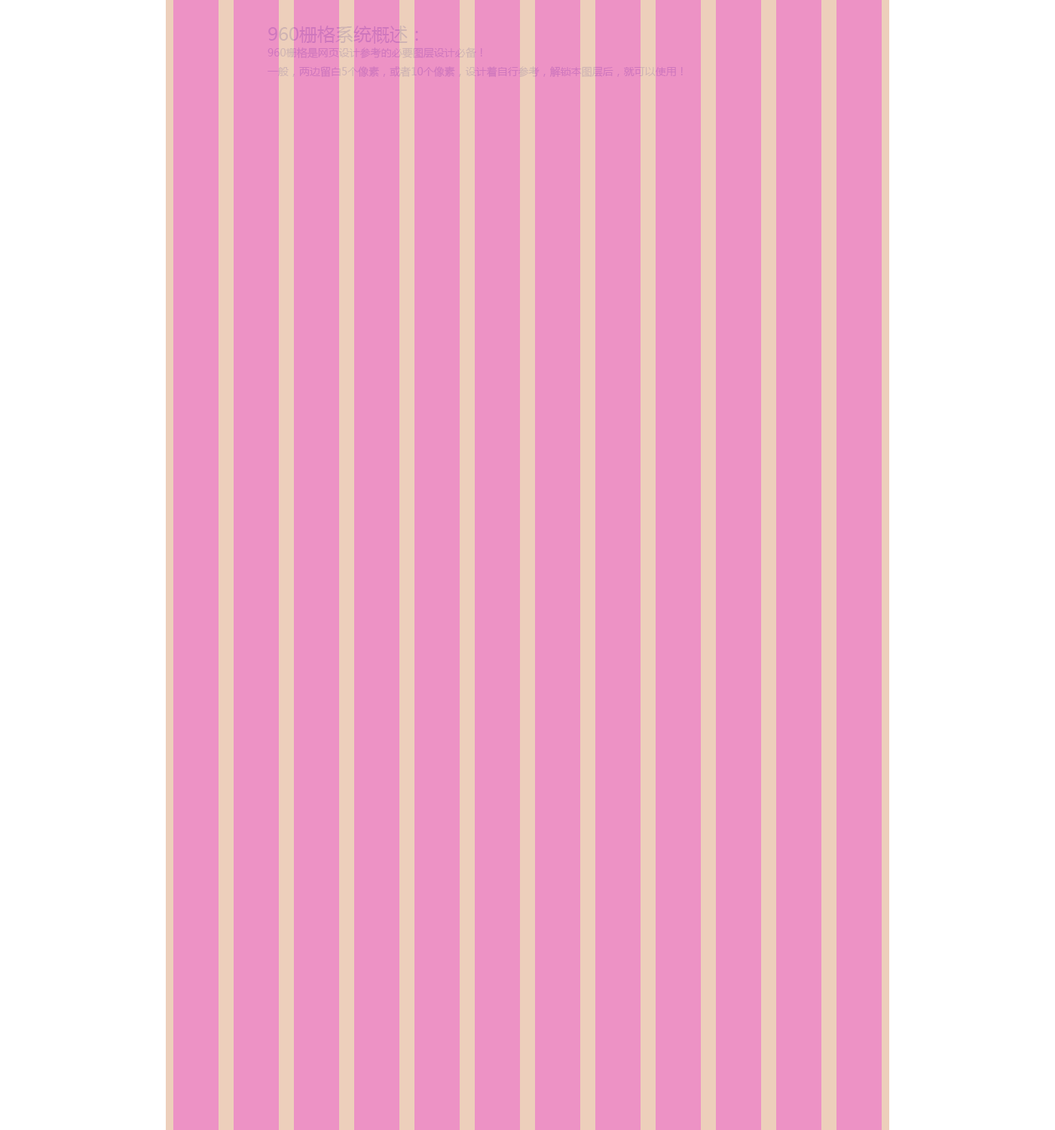
<style>
.page{position:relative;width:1055px;height:1130px;background:#ed92c5}
.page>*{position:absolute;margin:0}
.t1{font:10.5px/18.8px "MicrosoftYaHei";color:#cf77bd}
.t2{font:18.1px/22.6px "MicrosoftYaHei";color:#cf77bd}
</style>
<div class="page">
<p class="t1" style="left:268px;top:26px;width:415px;height:52px"><span class="t2">960栅格系统概述：<br></span>960栅格是网页设计参考的必要图层设计必备！<br>一般，两边留白5个像素，或者10个像素，设计着自行参考，解锁本图层后，就可以使用！</p>
</div>
